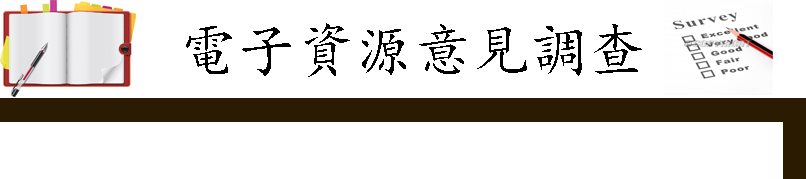
<style>
.page{position:relative;width:806px;height:179px;background:#ffffff}
.page>*{position:absolute;margin:0}
.t1{font:58.3px "KaiTi";color:#000000}
</style>
<div class="page">
<p class="t1" style="left:186px;top:23px;width:456px;height:54px">電子資源意見調查</p>
</div>
